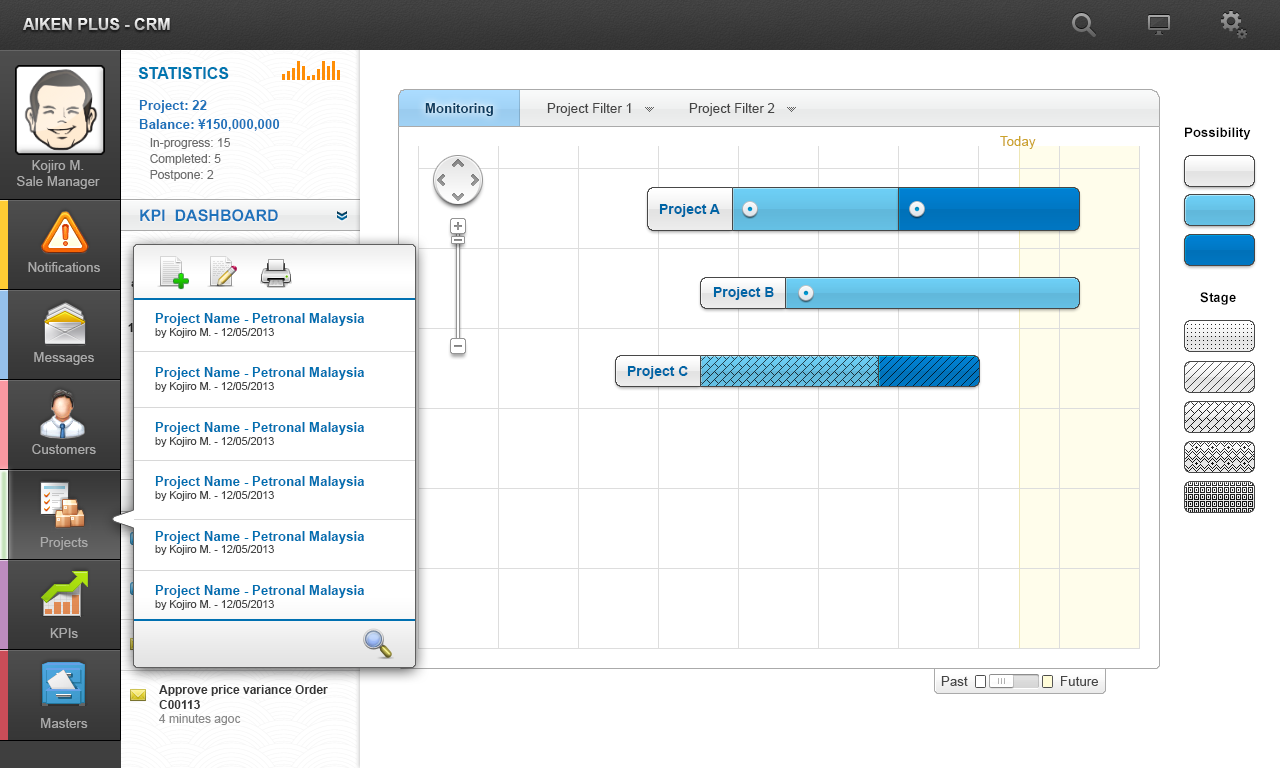
<style>
.page{position:relative;width:1280px;height:768px;background:#ffffff}
.page>*{position:absolute;margin:0}
.t1{font:16px "Arial-BoldMT";text-transform:uppercase}
.t2{font:16px "Arial-BoldMT";color:#0076b0;text-transform:uppercase}
.t3{font:13.3px/18.7px "Arial-BoldMT";color:#1f73bb}
.t4{font:12px/18.7px "ArialMT";color:#6d6d6d}
.t5{font:12px/16px "ArialMT";color:#6d6d6d}
.t6{font:13.3px "Arial-BoldMT";color:#0d3d60}
.t7{font:13.3px "ArialMT";color:#464646}
.t8{font:13.3px "ArialMT";color:#cca32a}
.t9{font:13.3px "Arial-BoldMT";color:#000000}
.t10{font:13.3px "ArialMT";color:#aaaaaa}
.t11{font:16px "Arial-BoldMT";color:#1f73bb;text-transform:uppercase}
.t12{font:14px "Arial-BoldMT";color:#0065a5}
.t13{font:13.3px "Arial-BoldMT";color:#0070b1}
.t14{font:10.7px "ArialMT";color:#464646}
</style>
<div class="page">
<p class="t1" style="left:23px;top:18px;width:147px;height:12px">AIKEN Plus - CRM</p>
<p class="t2" style="left:138px;top:67px;width:91px;height:12px">Statistics</p>
<p class="t3" style="left:139px;top:100px;width:141px;height:81px">Project: 22<br>Balance: ¥150,000,000<br><span class="t4">In-progress: 15<br></span><span class="t5">Completed: 5<br>Postpone: 2</span></p>
<p class="t6" style="left:425px;top:103px;width:68px;height:13px">Monitoring</p>
<p class="t7" style="left:547px;top:103px;width:84px;height:13px">Project Filter 1</p>
<p class="t7" style="left:689px;top:103px;width:86px;height:13px">Project Filter 2</p>
<p class="t8" style="left:1000px;top:136px;width:36px;height:13px">Today</p>
<p class="t9" style="left:1185px;top:127px;width:66px;height:13px">Possibility</p>
<p class="t10" style="left:17px;top:160px;width:83px;height:29px;text-align:center">Kojiro M.<br>Sale Manager</p>
<p class="t11" style="left:140px;top:209px;width:138px;height:13px">KPI  Dashboard</p>
<p class="t12" style="left:659px;top:204px;width:61px;height:13px">Project A</p>
<p class="t10" style="left:28px;top:262px;width:72px;height:10px">Notifications</p>
<p class="t12" style="left:713px;top:287px;width:61px;height:13px">Project B</p>
<p class="t9" style="left:1200px;top:292px;width:36px;height:13px">Stage</p>
<p class="t13" style="left:155px;top:313px;width:209px;height:297px">Project Name - Petronal Malaysia<br><span class="t14">by Kojiro M. - 12/05/2013<br><br><br></span>Project Name - Petronal Malaysia<br><span class="t14">by Kojiro M. - 12/05/2013<br><br><br></span>Project Name - Petronal Malaysia<br><span class="t14">by Kojiro M. - 12/05/2013<br><br><br></span>Project Name - Petronal Malaysia<br><span class="t14">by Kojiro M. - 12/05/2013<br><br><br></span>Project Name - Petronal Malaysia<br><span class="t14">by Kojiro M. - 12/05/2013<br><br><br></span>Project Name - Petronal Malaysia<br><span class="t14">by Kojiro M. - 12/05/2013</span></p>
<p class="t10" style="left:34px;top:352px;width:60px;height:13px">Messages</p>
<p class="t12" style="left:627px;top:366px;width:61px;height:13px">Project C</p>
<p class="t10" style="left:32px;top:444px;width:64px;height:10px">Customers</p>
<p class="t10" style="left:40px;top:537px;width:48px;height:13px">Projects</p>
<p class="t10" style="left:50px;top:628px;width:28px;height:10px">KPIs</p>
<p class="t7" style="left:941px;top:676px;width:157px;height:10px">Past      Future</p>
<p class="t10" style="left:41px;top:718px;width:47px;height:10px">Masters</p>
</div>
